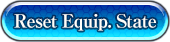
<style>
.page{position:relative;width:170px;height:42px}
.page>*{position:absolute;margin:0}
.t1{font:18px "RyuminPro-ExBold";letter-spacing:-0.04em;color:#fffffa}
</style>
<div class="page">
<p class="t1" style="left:14px;top:14px;width:142px;height:17px">Reset Equip. State</p>
</div>
